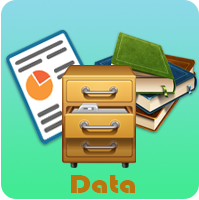
<style>
.page{position:relative;width:199px;height:200px}
.page>*{position:absolute;margin:0}
.t1{font:27.1px "Bauhaus93";color:#bb750f;scale:1.11 1}
</style>
<div class="page">
<p class="t1" style="left:71px;top:175px;width:64px;height:18px">Data</p>
</div>
